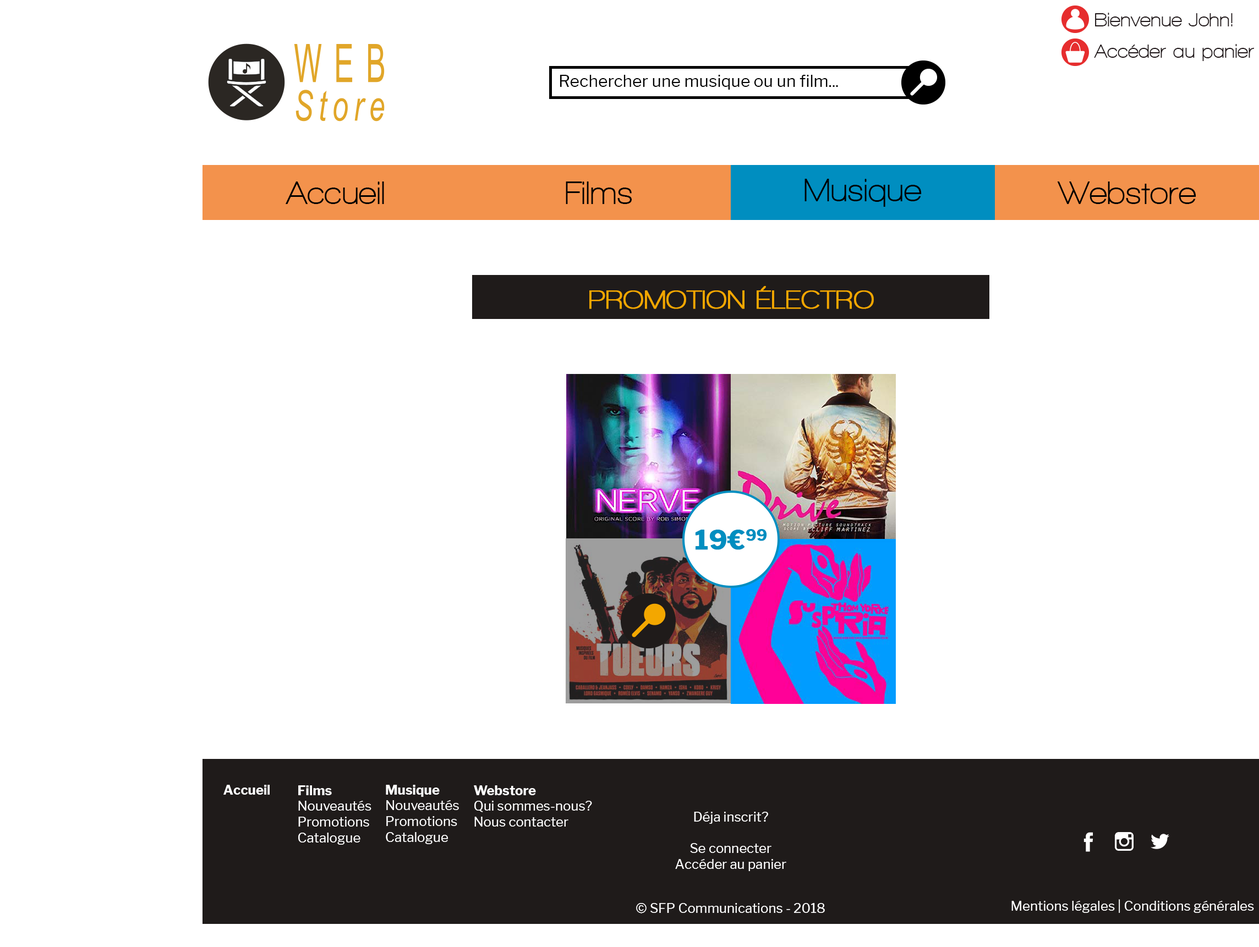
<style>
.page{position:relative;width:1259px;height:947px;background:#ffffff}
.page>*{position:absolute;margin:0}
.t1{font:19.8px "WalkwayBold";color:#1f1618}
.t2{font:16.5px "LibreFranklin-Regular";color:#000000}
.t3{font:33px "WalkwayBold";color:#000000}
.t4{font:26.4px "WalkwayBold";color:#f3a700;text-transform:uppercase;font-weight:bold}
.t5{font:26.4px "LibreFranklin-Bold";color:#008ec0;text-transform:uppercase;font-weight:bold}
.t6{font:13.2px "LibreFranklin-Bold";color:#ffffff}
.t7{font:13.2px "LibreFranklin-Regular";color:#ffffff}
</style>
<div class="page">
<p class="t1" style="left:1095px;top:13px;width:137px;height:13px">Bienvenue John!</p>
<p class="t1" style="left:1094px;top:44px;width:160px;height:17px">Accéder au panier</p>
<p class="t2" style="left:559px;top:75px;width:279px;height:15px">Rechercher une musique ou un film...</p>
<p class="t3" style="left:286px;top:182px;width:98px;height:22px">Accueil</p>
<p class="t3" style="left:566px;top:182px;width:66px;height:22px">Films</p>
<p class="t3" style="left:804px;top:179px;width:117px;height:28px">Musique</p>
<p class="t3" style="left:1057px;top:182px;width:139px;height:22px">Webstore</p>
<p class="t4" style="left:589px;top:286px;width:285px;height:23px">Promotion électro</p>
<p class="t5" style="left:695px;top:529px;width:72px;height:21px">19€99</p>
<p class="t6" style="left:223px;top:785px;width:47px;height:10px">Accueil</p>
<p class="t7" style="left:298px;top:786px;width:73px;height:59px;text-align:justify"><span class="t6">Films<br></span>Nouveautés<br>Promotions<br>Catalogue</p>
<p class="t7" style="left:386px;top:785px;width:73px;height:59px;text-align:justify"><span class="t6">Musique<br></span>Nouveautés<br>Promotions<br>Catalogue</p>
<p class="t7" style="left:474px;top:786px;width:118px;height:41px;text-align:justify"><span class="t6">Webstore<br></span>Qui sommes-nous?<br>Nous contacter</p>
<p class="t7" style="left:675px;top:812px;width:111px;height:59px;text-align:center">Déja inscrit?<br><br>Se connecter<br>Accéder au panier</p>
<p class="t7" style="left:636px;top:903px;width:189px;height:11px">© SFP Communications - 2018</p>
<p class="t7" style="left:1011px;top:899px;width:243px;height:14px">Mentions légales | Conditions générales</p>
</div>
